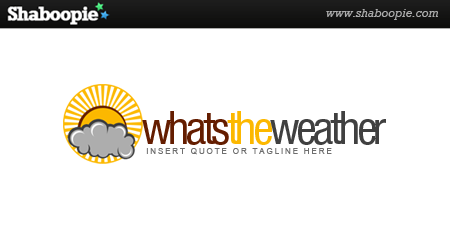
<style>
.page{position:relative;width:450px;height:250px;background:#ffffff}
.page>*{position:absolute;margin:0}
.t1{font:45.8px "HelveticaNeueLTStd-Cn";letter-spacing:-0.075em;color:#404040}
.t2{font:45.8px "HelveticaNeueLTStd-Cn";letter-spacing:-0.075em;color:#641d00}
.t3{font:45.8px "HelveticaNeueLTStd-Cn";letter-spacing:-0.075em;color:#fcb800}
.t4{font:8.3px "ArialMT";letter-spacing:0.2em;color:#6e6e6e}
</style>
<div class="page">
<p class="t1" style="left:142px;top:111px;width:244px;height:34px"><span class="t2">whats</span><span class="t3">the</span>weather</p>
<p class="t4" style="left:146px;top:148px;width:186px;height:7px">INSERT QUOTE OR TAGLINE HERE</p>
</div>
